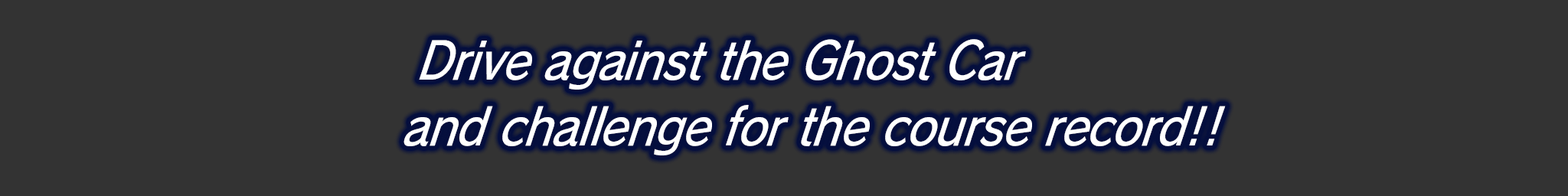
<style>
.page{position:relative;width:1568px;height:196px;background:#333333}
.page>*{position:absolute;margin:0}
.t1{font:53px "RodinPro-DB";letter-spacing:-0.02em;color:#ffffff;scale:0.86 1}
</style>
<div class="page">
<p class="t1" style="left:419px;top:39px;width:607px;height:51px">Drive against the Ghost Car</p>
<p class="t1" style="left:403px;top:105px;width:823px;height:50px">and challenge for the course record!!</p>
</div>
